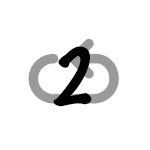
<style>
.page{position:relative;width:150px;height:150px;background:#ffffff}
.page>*{position:absolute;margin:0}
.t1{font:72px "MarkerFelt-Thin";color:#000000}
</style>
<div class="page">
<p class="t1" style="left:53px;top:46px;width:39px;height:61px">2</p>
</div>
